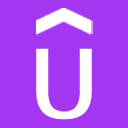
<style>
.page{position:relative;width:128px;height:128px;background:#a435f0}
.page>*{position:absolute;margin:0}
.t1{font:95px "DejaVuSans";color:#ffffff;font-weight:bold}
</style>
<div class="page">
<p class="t1" style="left:36px;top:48px;width:56px;height:72px">U</p>
</div>
